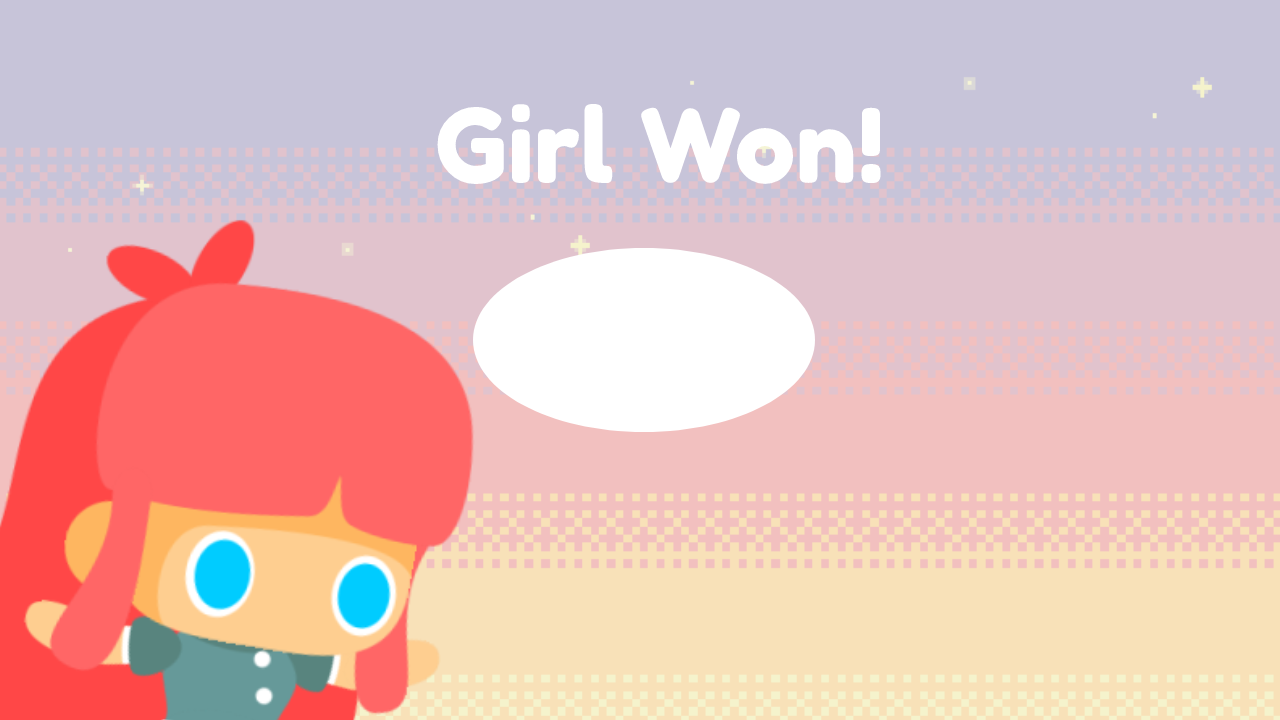
<style>
.page{position:relative;width:1280px;height:720px;background:#c7c4d9}
.page>*{position:absolute;margin:0}
.t1{font:102px "FredokaOne-Regular";color:#ffffff}
</style>
<div class="page">
<p class="t1" style="left:437px;top:103px;width:444px;height:82px">Girl Won!</p>
</div>
